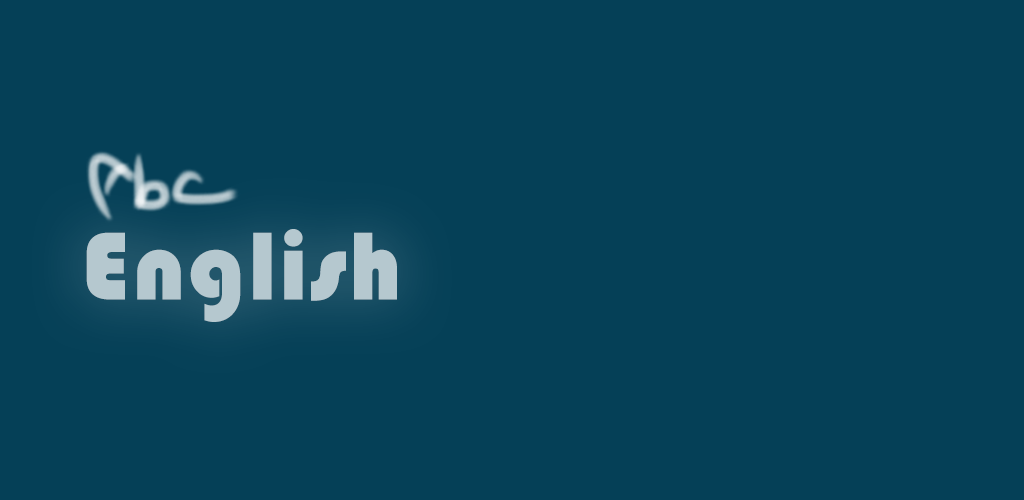
<style>
.page{position:relative;width:1024px;height:500px;background:#054057}
.page>*{position:absolute;margin:0}
.t1{font:99.9px "Bauhaus93";letter-spacing:0.022em;color:#b5c8cf}
</style>
<div class="page">
<p class="t1" style="left:86px;top:229px;width:311px;height:93px">English</p>
</div>
